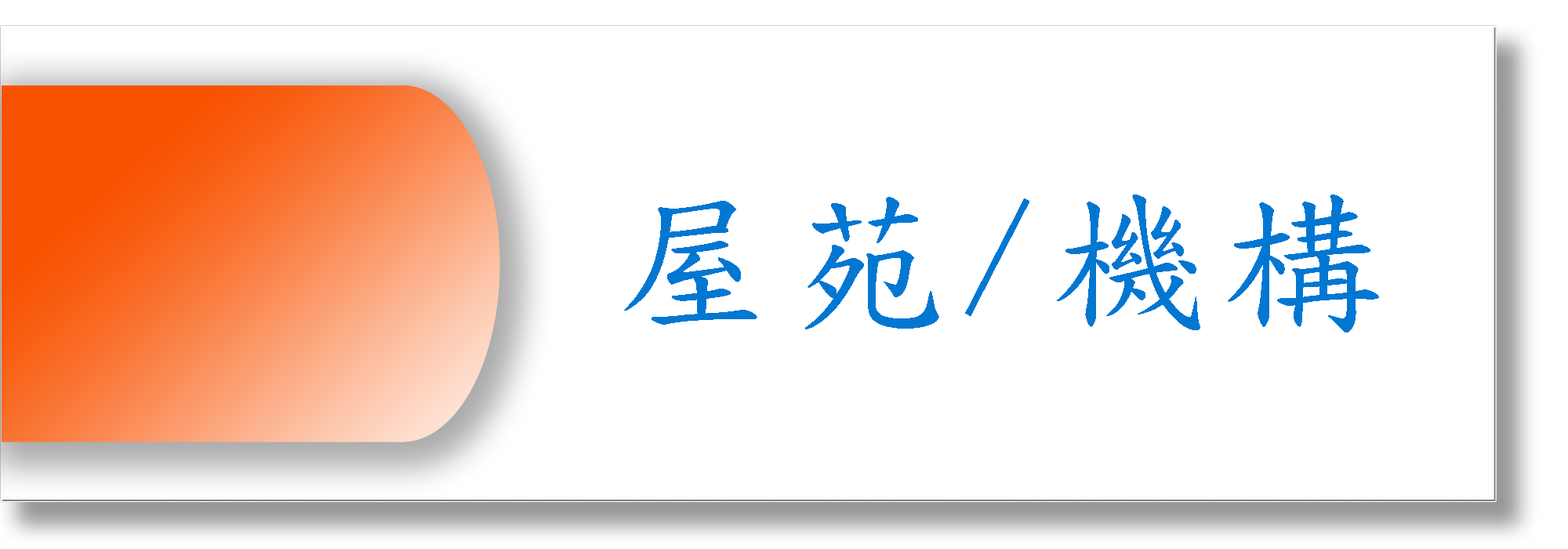
<style>
.page{position:relative;width:1568px;height:549px;background:#ffffff}
.page>*{position:absolute;margin:0}
.t1{font:156.8px "DFKaiShu-SB-Estd-BF";letter-spacing:0.08em;color:#0277d2}
</style>
<div class="page">
<p class="t1" style="left:624px;top:194px;width:755px;height:138px">屋苑/機構</p>
</div>
